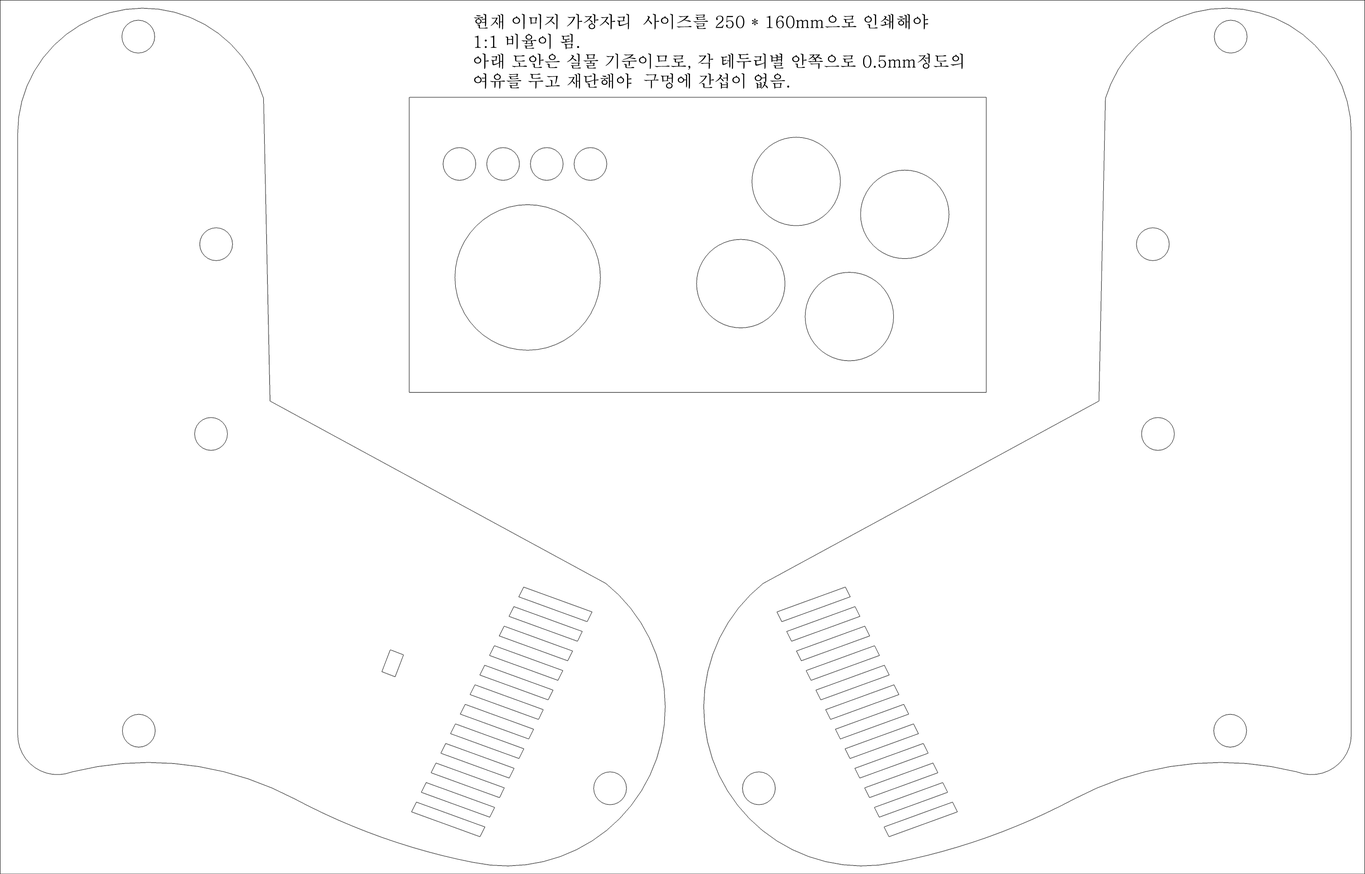
<style>
.page{position:relative;width:1365px;height:874px;background:#ffffff}
.page>*{position:absolute;margin:0}
.t1{font:16.5px "AdobeMyungjoStd-Medium";color:#000000}
</style>
<div class="page">
<p class="t1" style="left:474px;top:14px;width:489px;height:75px">현재 이미지 가장자리  사이즈를 250 * 160mm으로 인쇄해야<br>1:1 비율이 됨.<br>아래 도안은 실물 기준이므로, 각 테두리별 안쪽으로 0.5mm정도의 <br>여유를 두고 재단해야  구멍에 간섭이 없음.</p>
</div>
